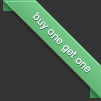
<style>
.page{position:relative;width:101px;height:101px;background:#333333}
.page>*{position:absolute;margin:0}
.t1{font:11px "ArialMT";color:#ffffff}
</style>
<div class="page">
<p class="t1" style="left:32px;top:12px;width:59px;height:61px;rotate:46deg">buy one get one</p>
</div>
